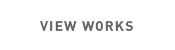
<style>
.page{position:relative;width:175px;height:50px;background:#ffffff}
.page>*{position:absolute;margin:0}
.t1{font:14px "DIN-Bold";letter-spacing:0.075em;color:#636363}
.t2{font:14px "DIN-Bold";letter-spacing:0.05em;color:#636363}
</style>
<div class="page">
<p class="t1" style="left:40px;top:21px;width:93px;height:10px">VIEW <span class="t2">WO</span>RKS</p>
</div>
